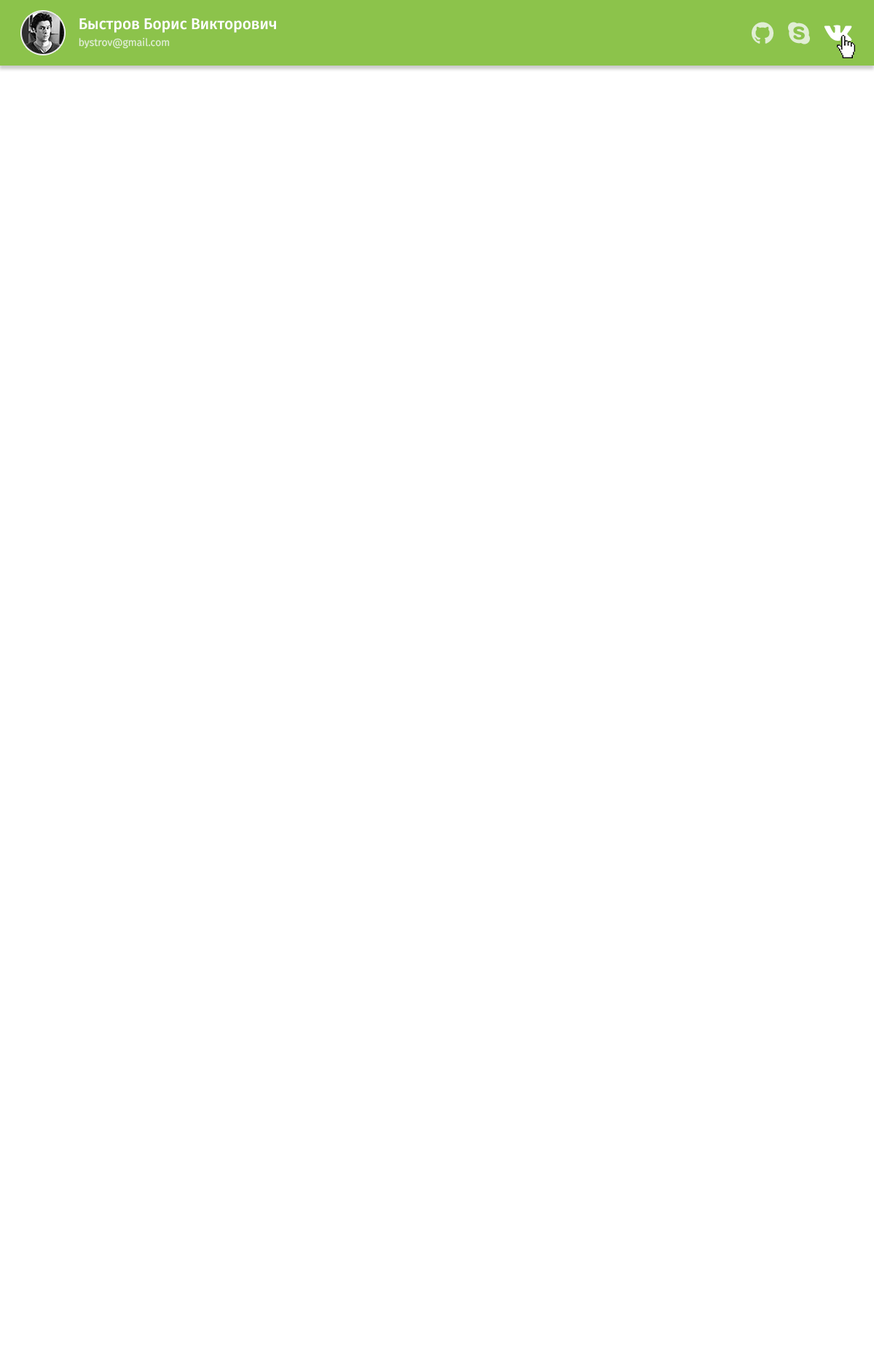
<style>
.page{position:relative;width:874px;height:1365px;background:#ffffff}
.page>*{position:absolute;margin:0}
.t1{font:15.5px "FiraSans-Medium";color:#ffffff}
.t2{font:10.3px "FiraSans-Regular";color:#e1eed4}
</style>
<div class="page">
<p class="t1" style="left:79px;top:18px;width:197px;height:15px">Быстров Борис Викторович</p>
<p class="t2" style="left:79px;top:37px;width:91px;height:12px">bystrov@gmail.com</p>
</div>
